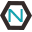
<style>
.page{position:relative;width:32px;height:32px;background:#ffffff}
.page>*{position:absolute;margin:0}
.t1{font:17.7px "LucidaSansUnicode";letter-spacing:0.005em;color:#13a4b1;scale:1.45 1}
</style>
<div class="page">
<p class="t1" style="left:8px;top:9px;width:15px;height:13px">N</p>
</div>
